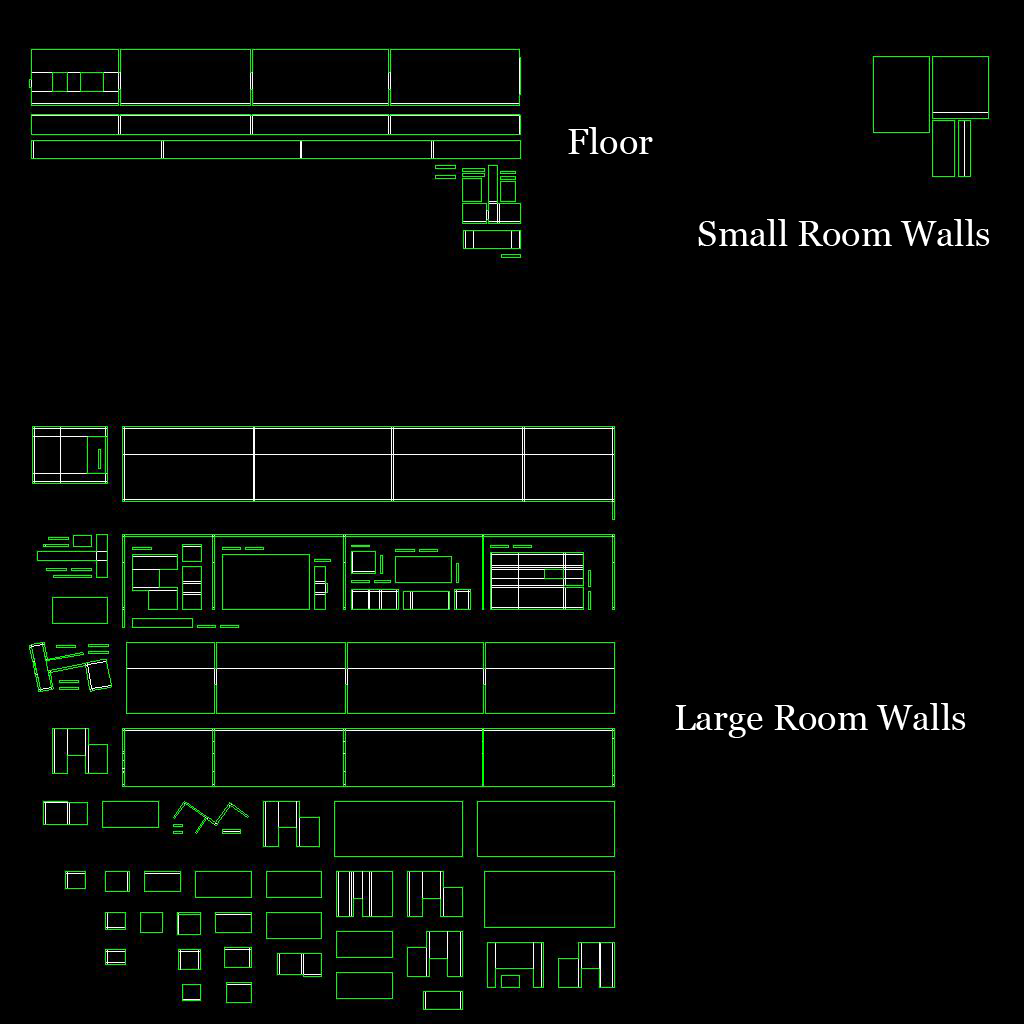
<style>
.page{position:relative;width:1024px;height:1024px;background:#000000}
.page>*{position:absolute;margin:0}
.t1{font:36px "Georgia";color:#ffffff}
</style>
<div class="page">
<p class="t1" style="left:568px;top:127px;width:85px;height:27px">Floor</p>
<p class="t1" style="left:698px;top:219px;width:292px;height:27px">Small Room Walls</p>
<p class="t1" style="left:675px;top:703px;width:291px;height:35px">Large Room Walls</p>
</div>
